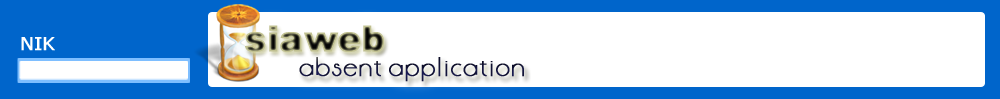
<style>
.page{position:relative;width:1000px;height:99px;background:#ffffff}
.page>*{position:absolute;margin:0}
.t1{font:35.6px "Arial-Black";font-weight:bold}
.t2{font:18px "Tahoma";color:#ffffff;font-weight:bold;scale:1.13 1}
.t3{font:24px "Anson";color:#13153b;font-weight:bold}
</style>
<div class="page">
<p class="t1" style="left:245px;top:25px;width:139px;height:27px">siaweb</p>
<p class="t2" style="left:21px;top:37px;width:34px;height:14px">NIK</p>
<p class="t3" style="left:299px;top:57px;width:225px;height:25px">absent application</p>
</div>
